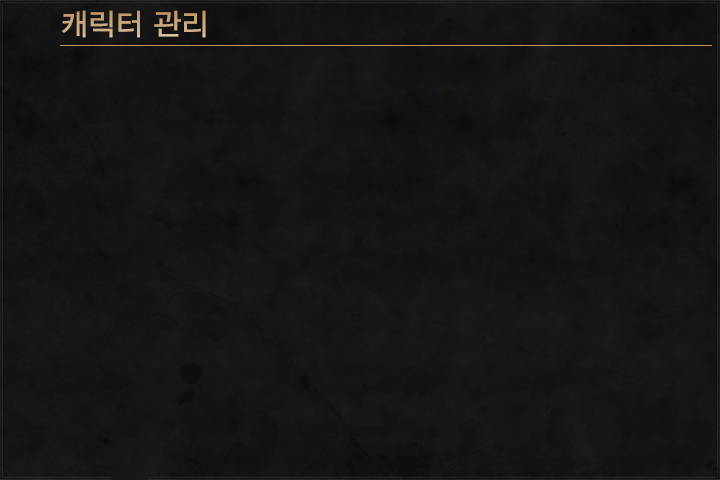
<style>
.page{position:relative;width:720px;height:480px}
.page>*{position:absolute;margin:0}
.t1{font:30px "YDIYGO330";color:#caa77e}
</style>
<div class="page">
<p class="t1" style="left:61px;top:10px;width:145px;height:28px">캐릭터 관리</p>
</div>
